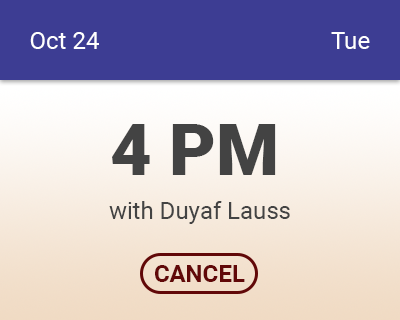
<style>
.page{position:relative;width:400px;height:320px;background:#3d3d93}
.page>*{position:absolute;margin:0}
.t1{font:24px "Roboto-Regular";color:#ffffff}
.t2{font:72px "Roboto-Black";color:#434343}
.t3{font:24px "Roboto-Regular";color:#434343}
.t4{font:24px "Roboto-Bold";color:#610808}
</style>
<div class="page">
<p class="t1" style="left:30px;top:32px;width:69px;height:17px">Oct 24</p>
<p class="t1" style="left:331px;top:32px;width:39px;height:17px">Tue</p>
<p class="t2" style="left:112px;top:124px;width:164px;height:51px">4 PM</p>
<p class="t3" style="left:109px;top:201px;width:181px;height:23px">with Duyaf Lauss</p>
<p class="t4" style="left:155px;top:265px;width:90px;height:17px">CANCEL</p>
</div>
